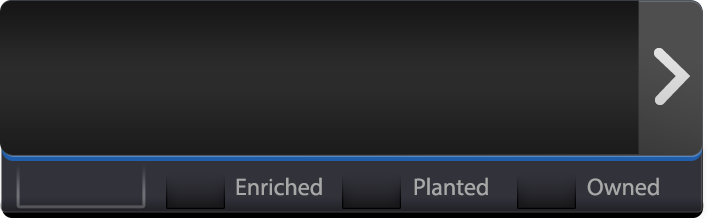
<style>
.page{position:relative;width:709px;height:220px}
.page>*{position:absolute;margin:0}
.t1{font:24px "MyriadPro-Regular";color:#a7a7a7}
.t2{font:24px "MyriadPro-Regular";color:#a8a8a8}
</style>
<div class="page">
<p class="t1" style="left:236px;top:177px;width:86px;height:19px">Enriched</p>
<p class="t2" style="left:414px;top:177px;width:74px;height:19px">Planted</p>
<p class="t2" style="left:587px;top:177px;width:72px;height:19px">Owned</p>
</div>
